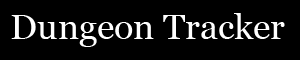
<style>
.page{position:relative;width:300px;height:60px;background:#000000}
.page>*{position:absolute;margin:0}
.t1{font:35.2px "Georgia";color:#ffffff}
</style>
<div class="page">
<p class="t1" style="left:11px;top:13px;width:274px;height:34px">Dungeon Tracker</p>
</div>
